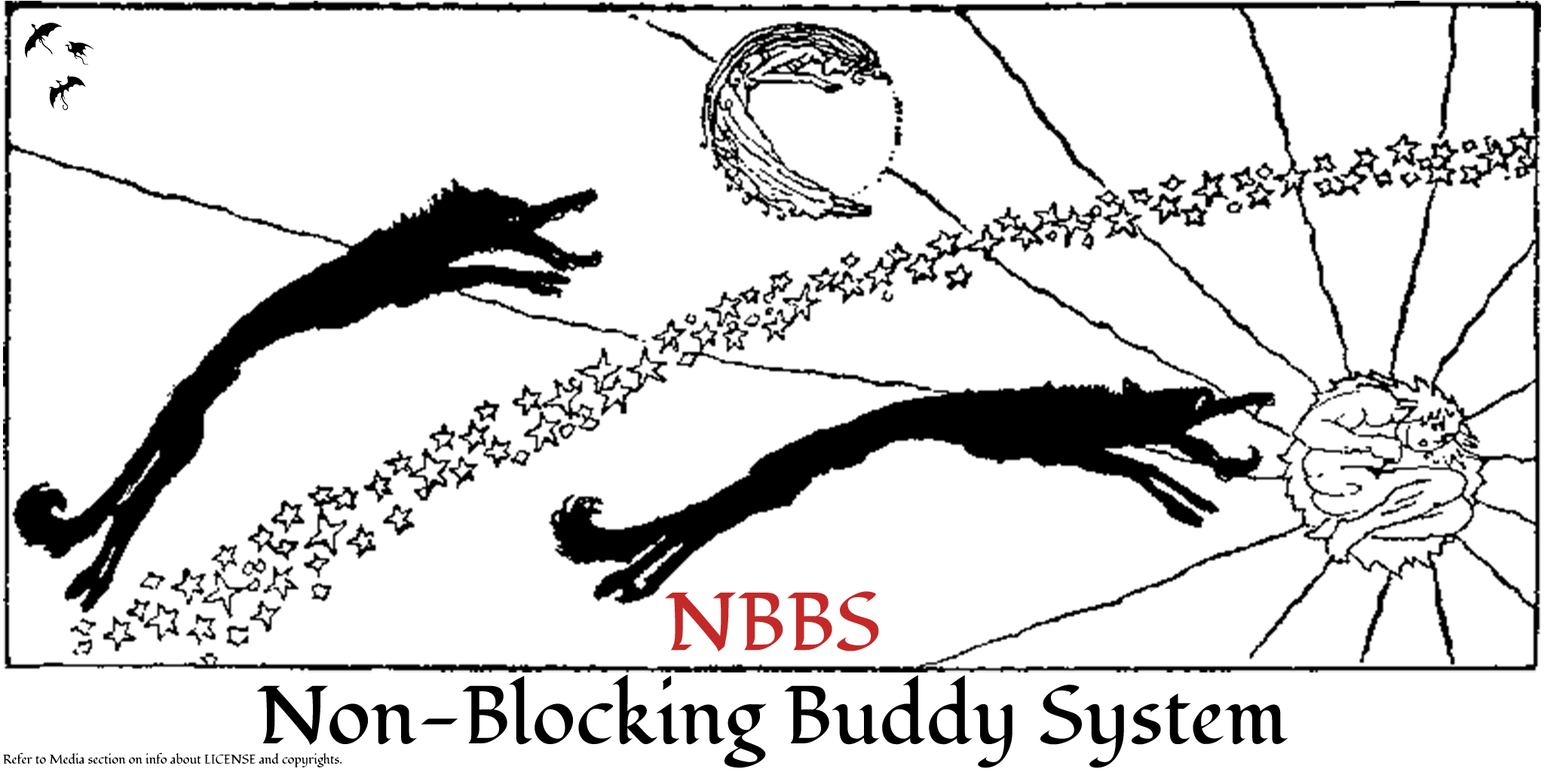
<style>
.page{position:relative;width:1544px;height:772px;background:#ffffff}
.page>*{position:absolute;margin:0}
.t1{font:81.7px "Fondamento-Regular";color:#c32929}
.t2{font:81.7px "Fondamento-Regular";color:#000000}
.t3{font:12.6px "Fondamento-Regular";color:#000000}
</style>
<div class="page">
<p class="t1" style="left:665px;top:591px;width:214px;height:61px">NBBS</p>
<p class="t2" style="left:257px;top:674px;width:1032px;height:94px">Non-Blocking Buddy System</p>
<p class="t3" style="left:3px;top:753px;width:339px;height:15px">Refer to Media section on info about LICENSE and copyrights.</p>
</div>
